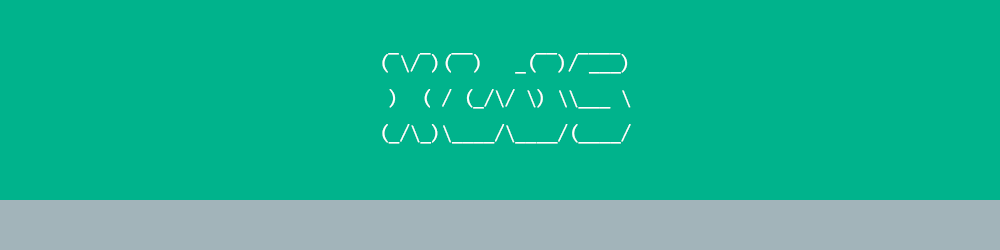
<style>
.page{position:relative;width:1000px;height:250px;background:#00b38c}
.page>*{position:absolute;margin:0}
.t1{font:20px "SimSun";color:#ffffff;font-weight:bold}
.t2{font:20px "SimSun";color:#ffffff}
</style>
<div class="page">
<p class="t1" style="left:382px;top:54px;width:249px;height:90px">( \/ )(  )   _(  )/ ___)<br> )  ( / (_/\/ \) \\___ \<br>(_/\_)\____/\____/(____/</p>
<p class="t1" style="left:388px;top:53px;width:233px;height:2px"><span class="t2"> </span>_  _  __      __  ____</p>
</div>
